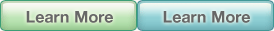
<style>
.page{position:relative;width:274px;height:31px}
.page>*{position:absolute;margin:0}
.t1{font:16px "HelveticaNeue-Bold";color:#676767}
.t2{font:16px "HelveticaNeue-Bold";color:#666666}
</style>
<div class="page">
<p class="t1" style="left:26px;top:11px;width:87px;height:12px">Learn More</p>
<p class="t2" style="left:163px;top:11px;width:87px;height:12px">Learn More</p>
</div>
